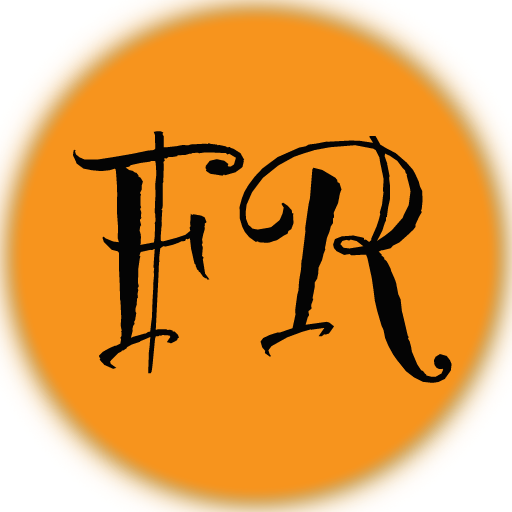
<style>
.page{position:relative;width:512px;height:512px;background:#f7941d}
.page>*{position:absolute;margin:0}
.t1{font:300px "PartyLetPlain";color:#040404}
</style>
<div class="page">
<p class="t1" style="left:73px;top:131px;width:379px;height:252px">FR</p>
</div>
